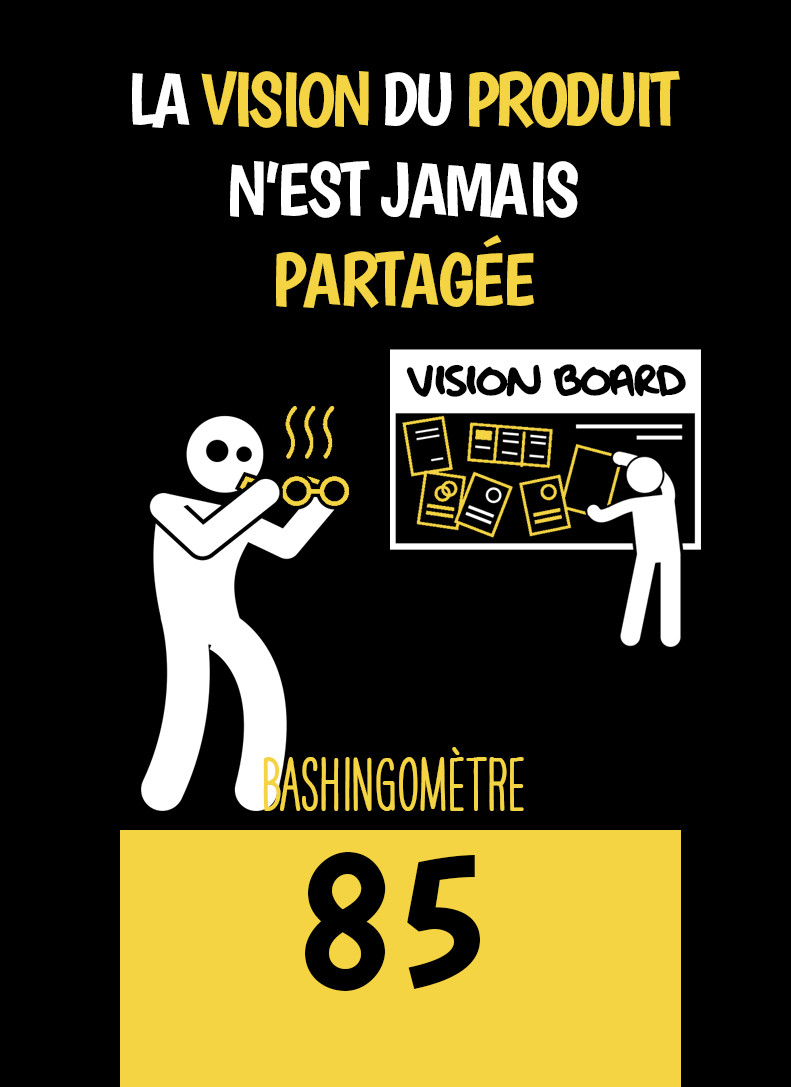
<style>
.page{position:relative;width:791px;height:1087px;background:#000000}
.page>*{position:absolute;margin:0}
.t1{font:75px "Boogaloo-Regular";letter-spacing:-0.04em;color:#ffffff}
.t2{font:75px "Boogaloo-Regular";letter-spacing:-0.06em;color:#ffffff}
.t3{font:75px "Boogaloo-Regular";letter-spacing:-0.06em;color:#f4d443}
.t4{font:75px "Boogaloo-Regular";letter-spacing:-0.04em;color:#f4d443}
.t5{font:50px "OakStreetW01-Regular";letter-spacing:-0.04em;color:#000000}
.t6{font:66.7px "HAVEANICEDAYTallW04-Bold";color:#f4d443}
.t7{font:200px "Boogaloo-Regular";color:#000000}
</style>
<div class="page">
<p class="t1" style="left:132px;top:71px;width:548px;height:237px;text-align:center"><span class="t2">LA </span><span class="t3">VISION</span><span class="t2"> DU </span><span class="t3">PRODUIT </span>N’EST JAMAIS<br><span class="t4">PARTAGÉE</span></p>
<p class="t5" style="left:406px;top:364px;width:280px;height:33px">VISION BOARD</p>
<p class="t6" style="left:263px;top:747px;width:261px;height:64px">BASHINgomètre</p>
<p class="t7" style="left:305px;top:852px;width:175px;height:139px">85</p>
</div>
